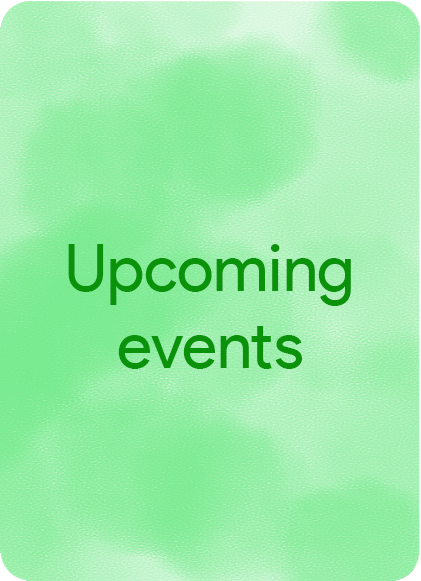
<style>
.page{position:relative;width:421px;height:581px}
.page>*{position:absolute;margin:0}
.t1{font:64.8px "ProductSans-Regular";color:#0a930a}
</style>
<div class="page">
<p class="t1" style="left:68px;top:244px;width:283px;height:125px;text-align:center">Upcoming events</p>
</div>
